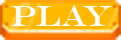
<style>
.page{position:relative;width:121px;height:40px;background:#ffb900}
.page>*{position:absolute;margin:0}
.t1{font:30px "EngraversMT";color:#ffffff}
</style>
<div class="page">
<p class="t1" style="left:11px;top:5px;width:100px;height:21px">Play</p>
</div>
